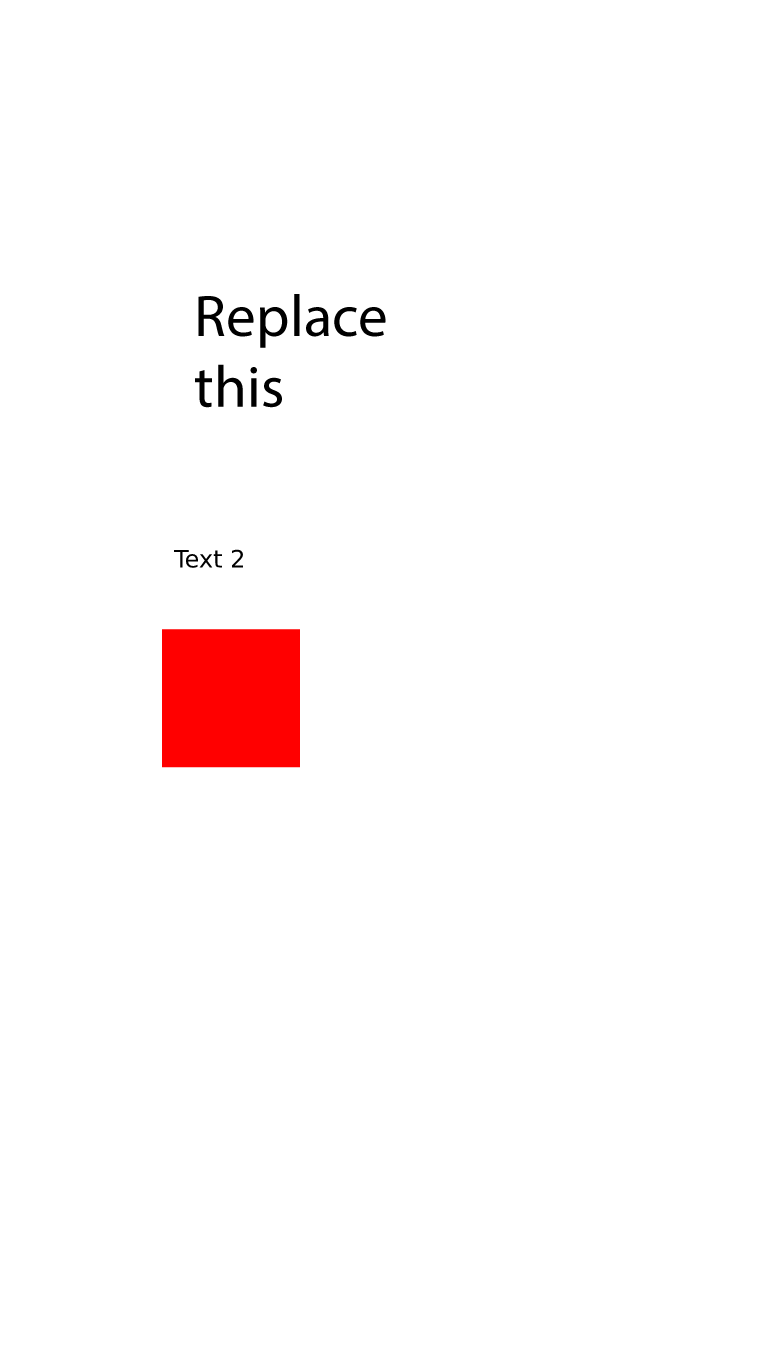
<style>
.page{position:relative;width:768px;height:1366px;background:#ffffff}
.page>*{position:absolute;margin:0}
.t1{font:59px "MyriadPro-Regular";color:#000000}
.t2{font:24px "DejaVuSans";color:#000000}
</style>
<div class="page">
<p class="t1" style="left:195px;top:294px;width:191px;height:114px">Replace<br>this</p>
<p class="t2" style="left:173px;top:549px;width:71px;height:19px">Text 2</p>
</div>
